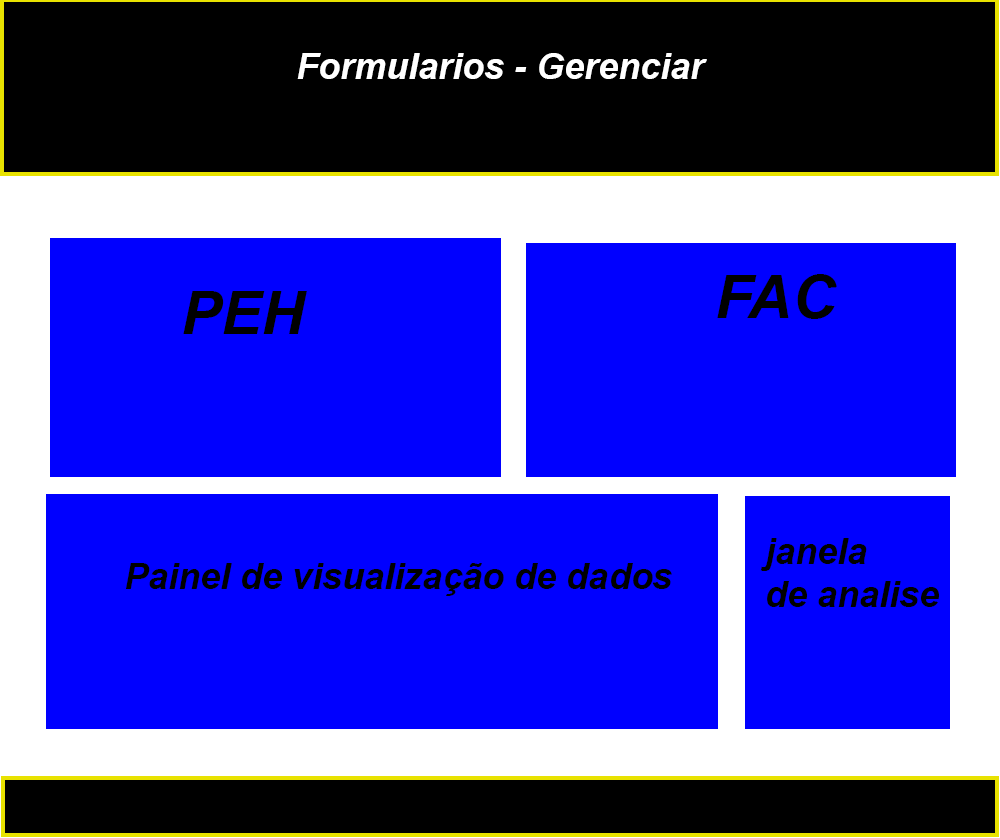
<style>
.page{position:relative;width:1000px;height:838px;background:#0000ff}
.page>*{position:absolute;margin:0}
.t1{font:36px "Arial-BoldItalicMT";color:#ffffff}
.t2{font:60px "Arial-BoldItalicMT";color:#000000}
.t3{font:36px "Arial-BoldItalicMT";color:#000000}
</style>
<div class="page">
<p class="t1" style="left:297px;top:53px;width:410px;height:26px">Formularios - Gerenciar</p>
<p class="t2" style="left:717px;top:274px;width:120px;height:45px">FAC</p>
<p class="t2" style="left:183px;top:291px;width:124px;height:43px">PEH</p>
<p class="t3" style="left:760px;top:538px;width:179px;height:69px">janela<br>de analise</p>
<p class="t3" style="left:126px;top:563px;width:546px;height:33px">Painel de visualização de dados</p>
</div>
